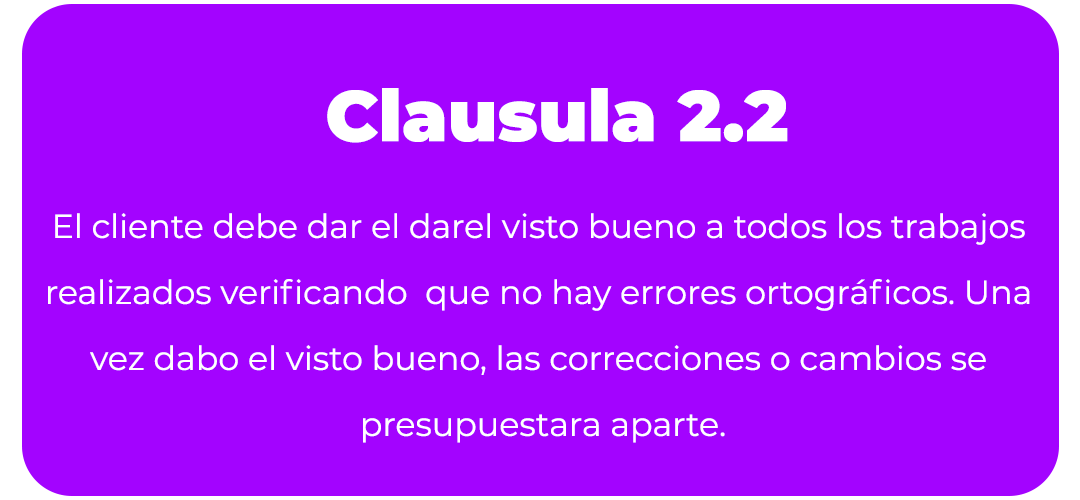
<style>
.page{position:relative;width:1080px;height:500px;background:#a303ff}
.page>*{position:absolute;margin:0}
.t1{font:71.5px "Montserrat-Black";color:#ffffff}
.t2{font:33.3px/66px "Montserrat-Regular";color:#ffffff}
</style>
<div class="page">
<p class="t1" style="left:327px;top:88px;width:461px;height:55px">Clausula 2.2</p>
<p class="t2" style="left:48px;top:213px;width:982px;height:230px;text-align:center">El cliente debe dar el darel visto bueno a todos los trabajos <br>realizados verificando  que no hay errores ortográficos. Una <br>vez dabo el visto bueno, las correcciones o cambios se <br>presupuestara aparte.</p>
</div>
